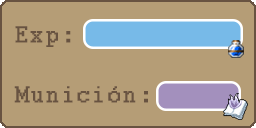
<style>
.page{position:relative;width:256px;height:128px;background:#b59d76}
.page>*{position:absolute;margin:0}
.t1{font:25px "Courier";letter-spacing:0.05em;color:#685341;font-weight:bold}
</style>
<div class="page">
<p class="t1" style="left:15px;top:26px;width:56px;height:21px">Exp:</p>
<p class="t1" style="left:14px;top:86px;width:134px;height:17px">Munición:</p>
</div>
